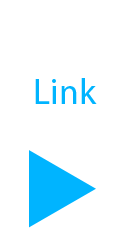
<style>
.page{position:relative;width:125px;height:245px;background:#ffffff}
.page>*{position:absolute;margin:0}
.t1{font:36px "MyriadPro-Regular";color:#00b4ff}
</style>
<div class="page">
<p class="t1" style="left:35px;top:78px;width:62px;height:26px">Link</p>
</div>
